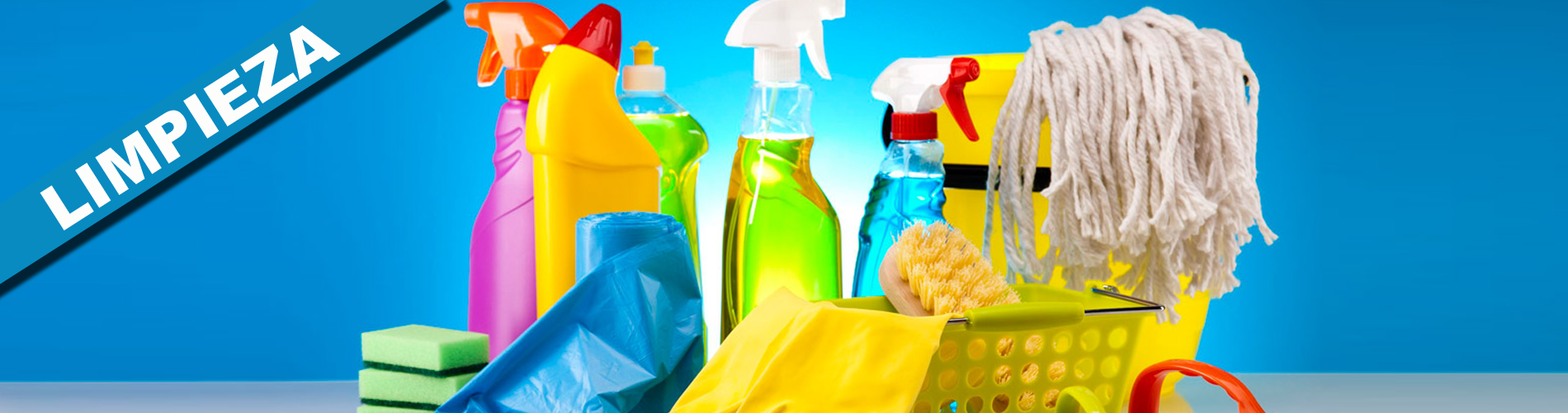
<style>
.page{position:relative;width:1568px;height:413px}
.page>*{position:absolute;margin:0}
.t1{font:62.4px "Arial-Black";color:#fdfdfc}
</style>
<div class="page">
<p class="t1" style="left:40px;top:25px;width:301px;height:205px;rotate:-33deg">LIMPIEZA</p>
</div>
